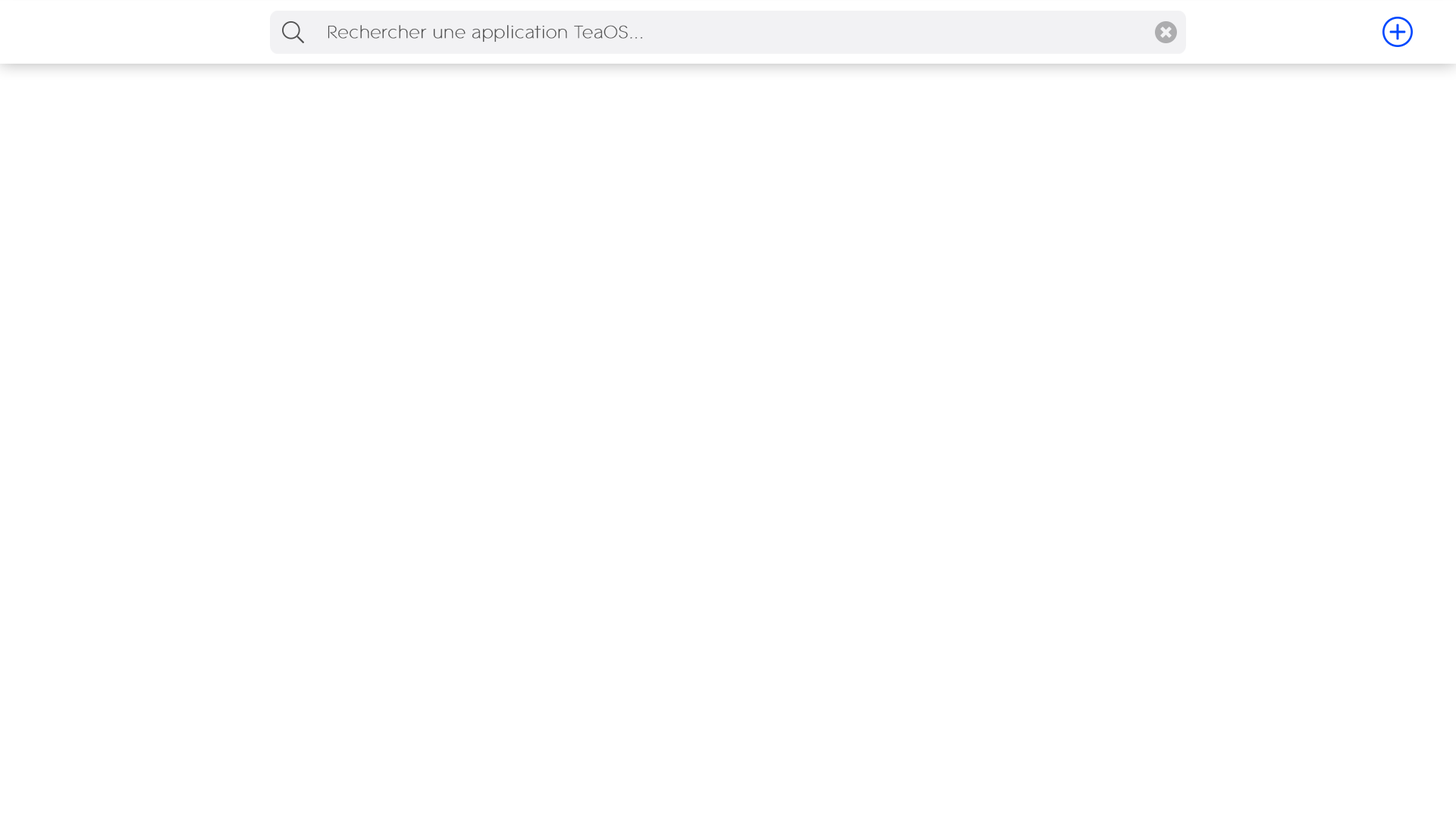
<style>
.page{position:relative;width:1456px;height:819px;background:#ffffff}
.page>*{position:absolute;margin:0}
.t1{font:18.2px "ContaxW01-25UltraLight";color:#4d4d4d;font-weight:bold}
</style>
<div class="page">
<p class="t1" style="left:328px;top:25px;width:314px;height:17px">Rechercher une application TeaOS...</p>
</div>
